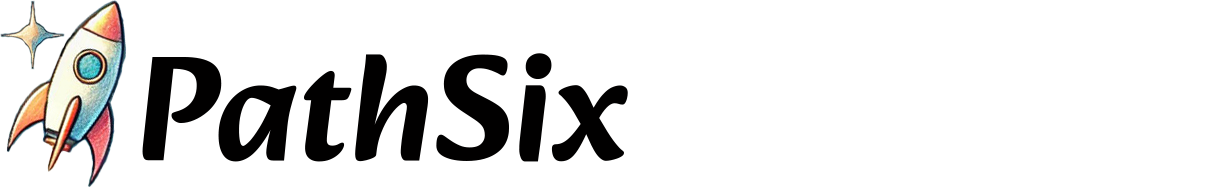
<style>
.page{position:relative;width:1217px;height:193px;background:#ffffff}
.page>*{position:absolute;margin:0}
.t1{font:150px "Alkatra-SemiBold";color:#010000}
</style>
<div class="page">
<p class="t1" style="left:142px;top:53px;width:486px;height:109px">PathSix</p>
</div>
